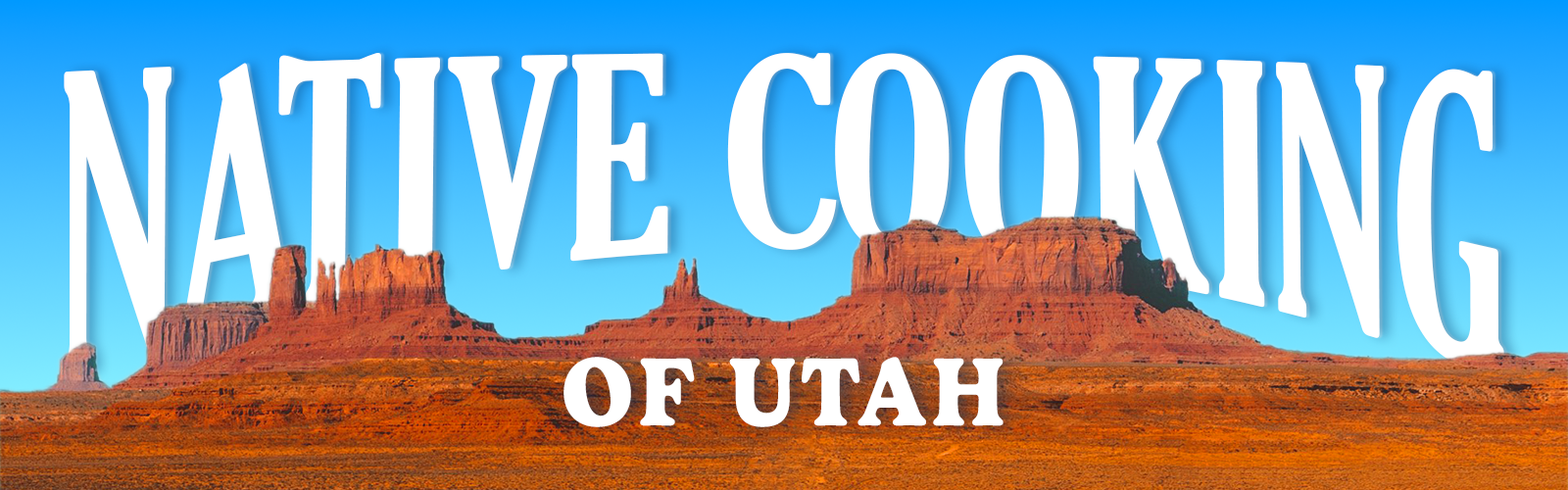
<style>
.page{position:relative;width:1568px;height:490px}
.page>*{position:absolute;margin:0}
.t1{font:413px "GloucesterMT-ExtraCondensed";color:#ffffff;scale:0.69 1}
.t2{font:98px "Gelica-Bold";letter-spacing:0.04em;color:#ffffff}
</style>
<div class="page">
<p class="t1" style="left:64px;top:53px;width:1440px;height:328px">NATIVE COOKING</p>
<p class="t2" style="left:564px;top:357px;width:440px;height:70px">OF UTAH</p>
</div>
